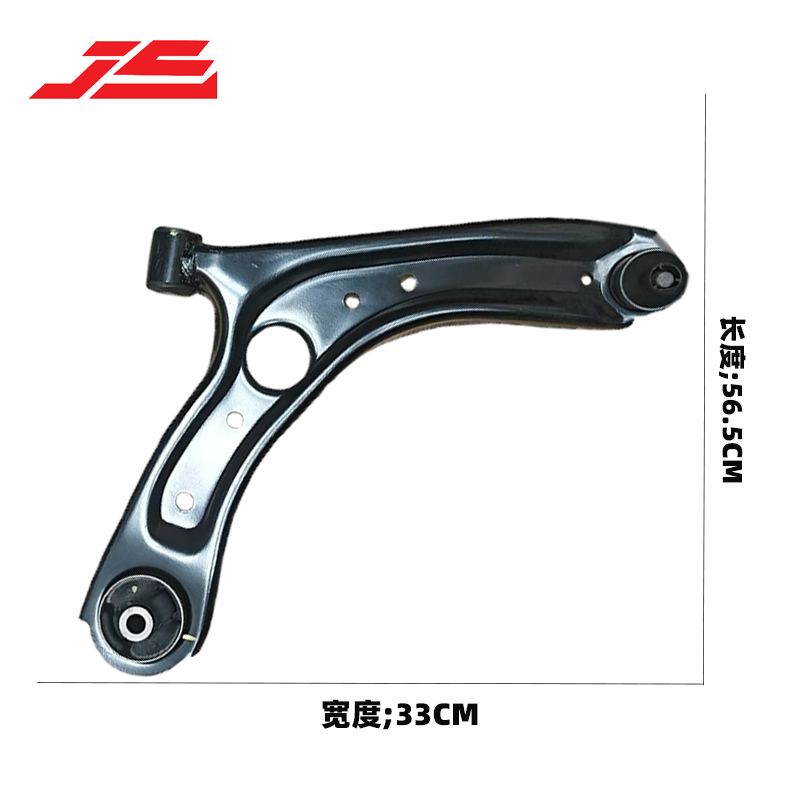
<style>
.page{position:relative;width:800px;height:800px;background:#ffffff}
.page>*{position:absolute;margin:0}
.t1{font:27.8px "AlibabaPuHuiTi_3_115_Black";color:#090909}
.t2{font:31px "AlibabaPuHuiTi_3_115_Black";color:#090909}
</style>
<div class="page">
<p class="t1" style="left:719px;top:316px;width:27px;height:167px;rotate:90deg">长度;56.5CM</p>
<p class="t2" style="left:321px;top:699px;width:157px;height:31px">宽度;33CM</p>
</div>
